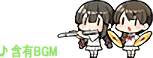
<style>
.page{position:relative;width:153px;height:58px;background:#ffffff}
.page>*{position:absolute;margin:0}
.t1{font:14px "MS-UIGothic";color:#91e469;font-weight:bold;scale:0.8 1}
</style>
<div class="page">
<p class="t1" style="left:11px;top:44px;width:46px;height:14px">含有BGM</p>
</div>
